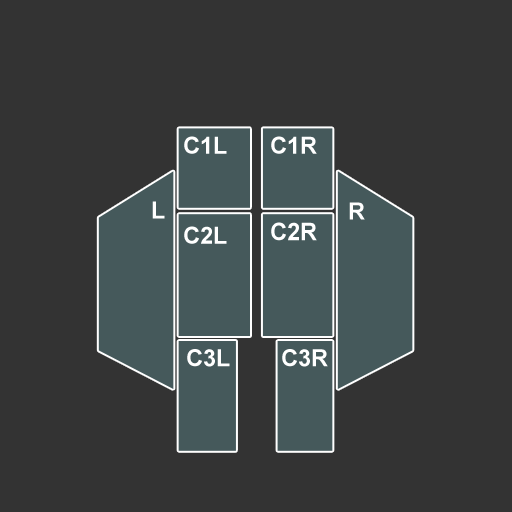
<style>
.page{position:relative;width:512px;height:512px;background:#333333}
.page>*{position:absolute;margin:0}
.t1{font:23.4px "Arial-BoldMT";color:#ffffff}
.t2{font:24.3px "Arial-BoldMT";color:#ffffff;scale:0.96 1}
</style>
<div class="page">
<p class="t1" style="left:184px;top:136px;width:43px;height:18px">C1L</p>
<p class="t1" style="left:271px;top:136px;width:46px;height:18px">C1R</p>
<p class="t1" style="left:152px;top:201px;width:13px;height:18px">L</p>
<p class="t1" style="left:349px;top:202px;width:16px;height:18px">R</p>
<p class="t2" style="left:271px;top:222px;width:46px;height:19px">C2R</p>
<p class="t1" style="left:184px;top:226px;width:43px;height:18px">C2L</p>
<p class="t1" style="left:187px;top:349px;width:43px;height:18px">C3L</p>
<p class="t1" style="left:282px;top:349px;width:46px;height:18px">C3R</p>
</div>
